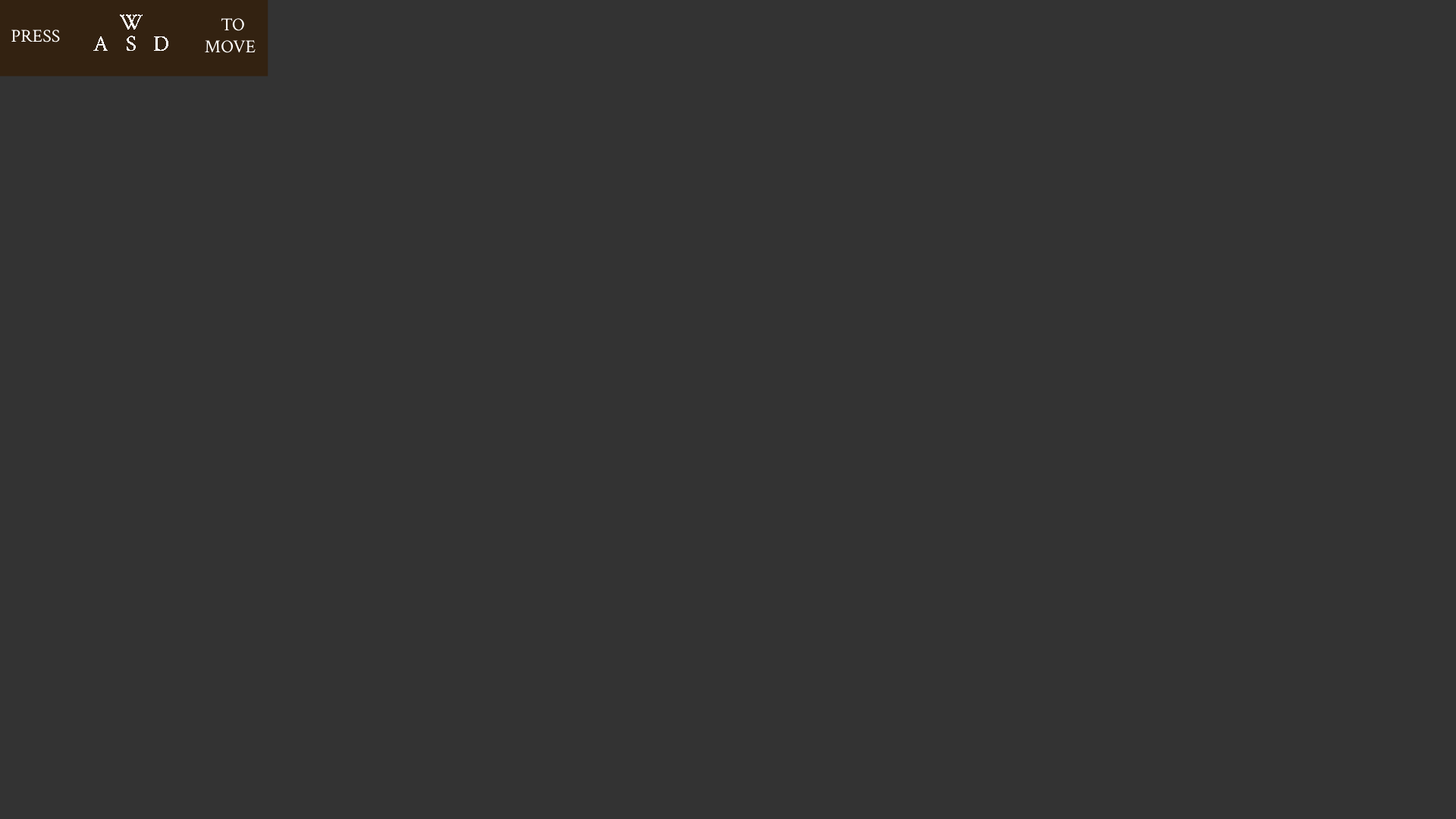
<style>
.page{position:relative;width:1456px;height:819px;background:#333333}
.page>*{position:absolute;margin:0}
.t1{font:22.7px "CrimsonText-Regular";color:#ffffff}
.t2{font:18.3px "CrimsonText-Regular";color:#ffffff}
</style>
<div class="page">
<p class="t1" style="left:120px;top:14px;width:23px;height:16px">W</p>
<p class="t2" style="left:11px;top:30px;width:49px;height:12px">PRESS</p>
<p class="t2" style="left:205px;top:18px;width:51px;height:35px">TO <br>MOVE</p>
<p class="t1" style="left:93px;top:36px;width:15px;height:15px">A</p>
<p class="t1" style="left:127px;top:36px;width:9px;height:15px">S</p>
<p class="t1" style="left:154px;top:36px;width:14px;height:15px">D</p>
</div>
